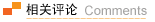
<style>
.page{position:relative;width:155px;height:22px;background:#ffffff}
.page>*{position:absolute;margin:0}
.t1{font:13px "SimHei";color:#000000}
.t2{font:13px "ArialMT";color:#a5a4a3}
</style>
<div class="page">
<p class="t1" style="left:26px;top:3px;width:52px;height:13px">相关评论</p>
<p class="t2" style="left:85px;top:5px;width:62px;height:11px">Comments</p>
</div>
